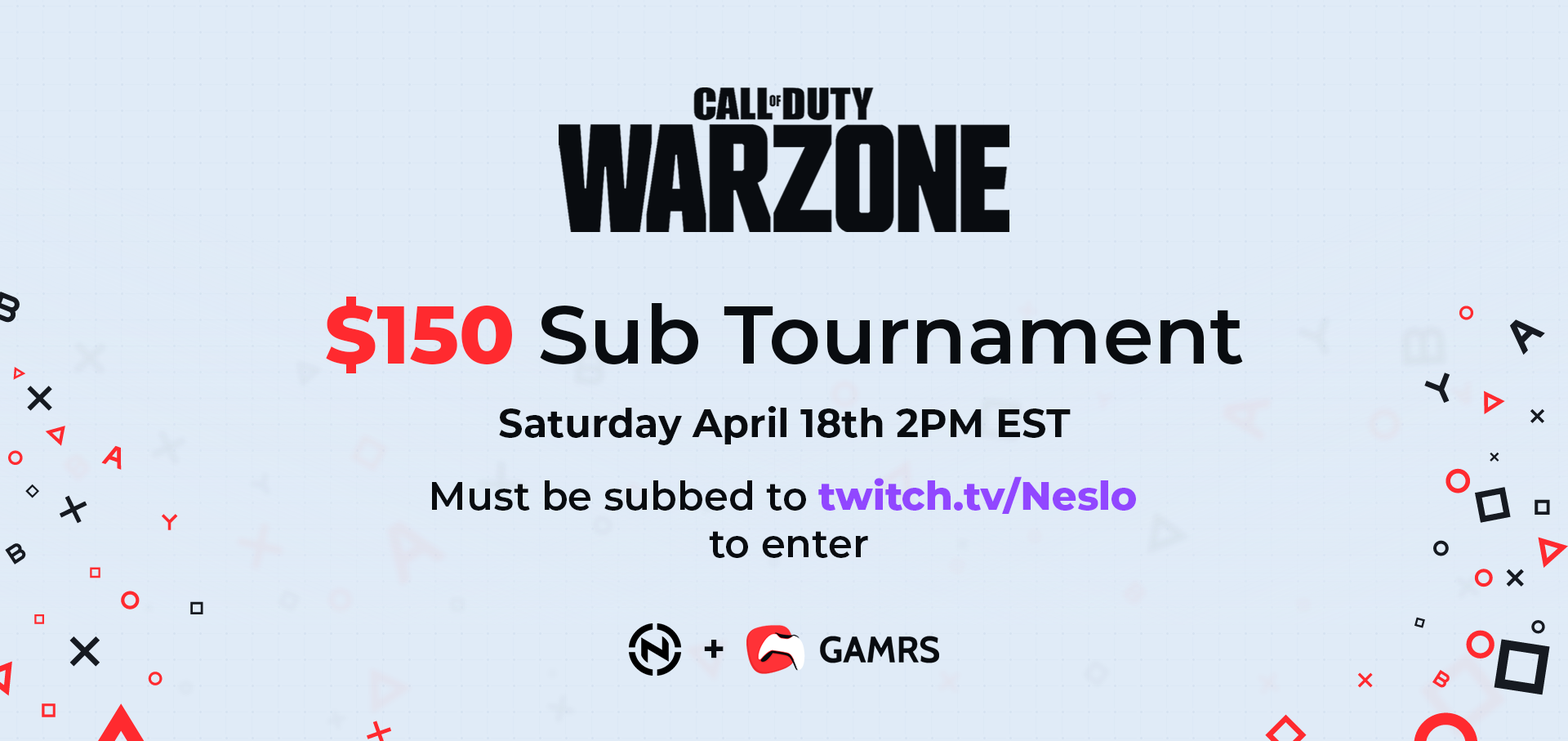
<style>
.page{position:relative;width:1568px;height:741px;background:#e0ebf7}
.page>*{position:absolute;margin:0}
.t1{font:81.6px "Montserrat-SemiBold";color:#090c10}
.t2{font:81.6px "Montserrat-ExtraBold";color:#ff2a2f}
.t3{font:39.2px "Montserrat-Bold";color:#090c10}
.t4{font:39.2px "Montserrat-SemiBold";color:#090c10}
.t5{font:39.2px "Montserrat-ExtraBold";color:#9147ff}
</style>
<div class="page">
<p class="t1" style="left:326px;top:296px;width:917px;height:77px"><span class="t2">$150</span> Sub Tournament</p>
<p class="t3" style="left:499px;top:406px;width:572px;height:39px">Saturday April 18th 2PM EST</p>
<p class="t4" style="left:432px;top:476px;width:704px;height:82px;text-align:center">Must be subbed to <span class="t5">twitch.tv/Neslo <br></span>to enter</p>
<p class="t3" style="left:704px;top:639px;width:20px;height:19px">+</p>
</div>
